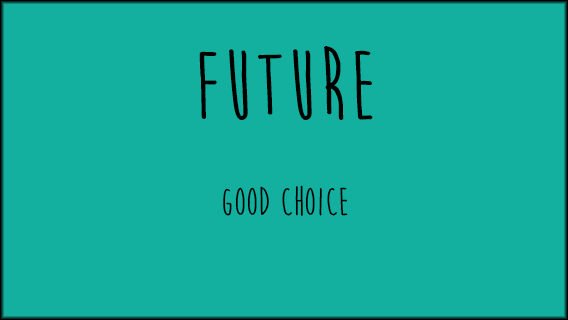
<style>
.page{position:relative;width:568px;height:320px;background:#13b0a0}
.page>*{position:absolute;margin:0}
.t1{font:40px "MoonFlowerBold";color:#000000}
.t2{font:100px "MoonFlowerBold";color:#000000}
</style>
<div class="page">
<p class="t1" style="left:199px;top:46px;width:174px;height:170px;text-align:center"><span class="t2">future<br></span><br>good choice</p>
</div>
